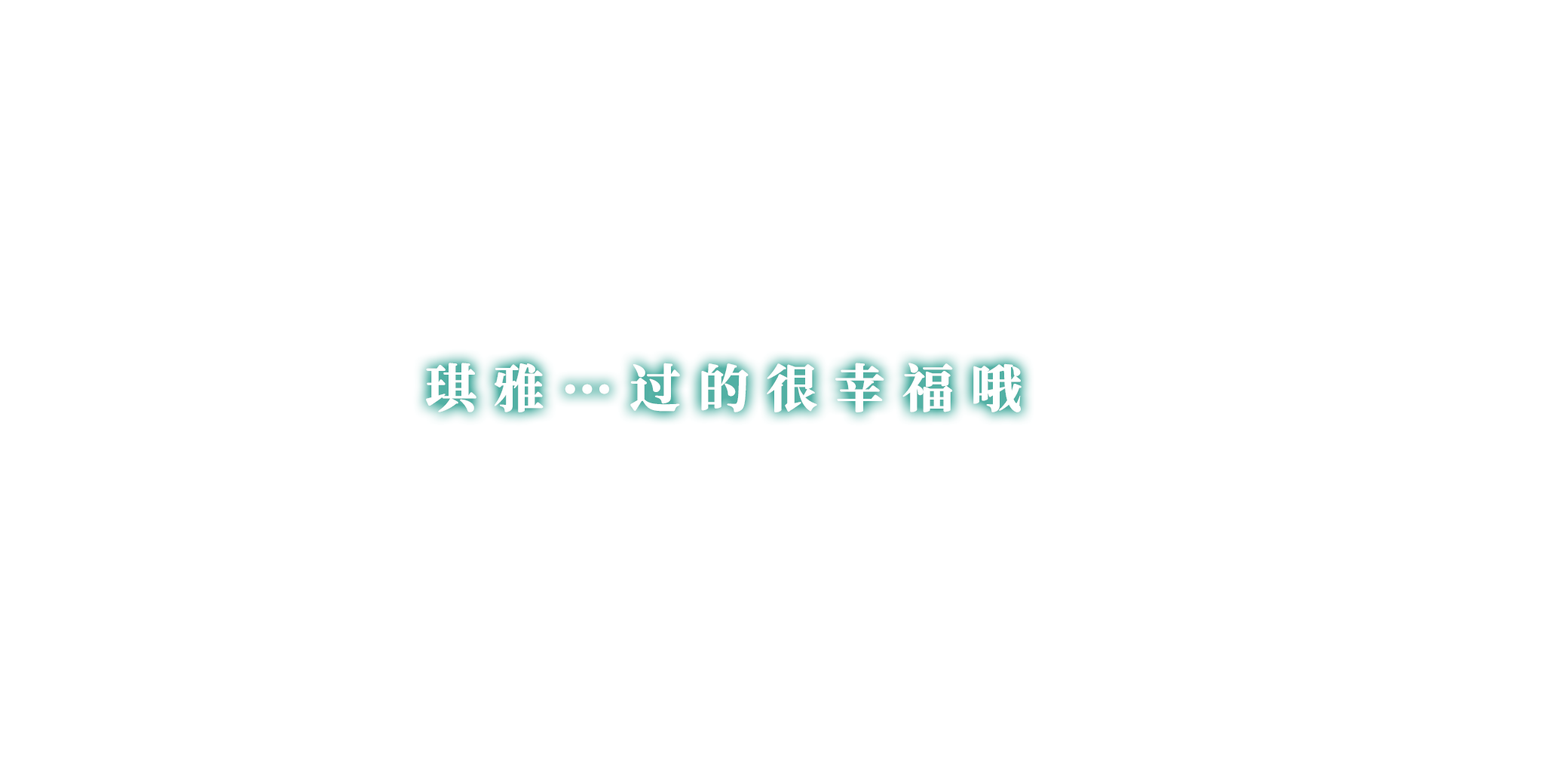
<style>
.page{position:relative;width:1544px;height:772px;background:#ffffff}
.page>*{position:absolute;margin:0}
.t1{font:51.3px "ChillJinshuSongHeavy";letter-spacing:0.33em;color:#ffffff}
.t2{font:51.3px "FZTYSK--GBK1-0";letter-spacing:0.33em;color:#ffffff}
</style>
<div class="page">
<p class="t1" style="left:426px;top:363px;width:596px;height:49px">琪雅<span class="t2">…</span>过的很幸福哦</p>
</div>
